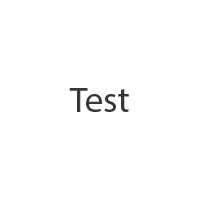
<style>
.page{position:relative;width:200px;height:200px;background:#ffffff}
.page>*{position:absolute;margin:0}
.t1{font:35.6px "MyriadPro-Regular";color:#363636}
</style>
<div class="page">
<p class="t1" style="left:69px;top:88px;width:60px;height:24px">Test</p>
</div>
